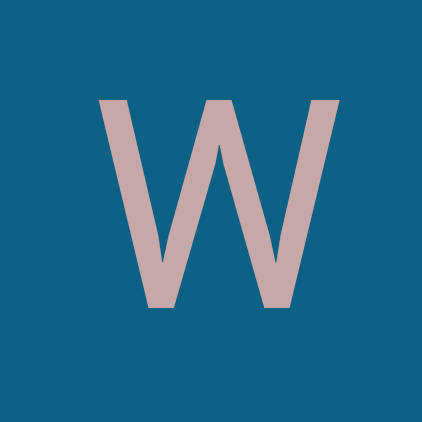
<style>
.page{position:relative;width:422px;height:422px;background:#0c6184}
.page>*{position:absolute;margin:0}
.t1{font:291.7px "Roboto-Regular";color:#c6a8a8}
</style>
<div class="page">
<p class="t1" style="left:98px;top:100px;width:242px;height:208px">W</p>
</div>
